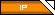
<style>
.page{position:relative;width:55px;height:15px;background:#f98b00}
.page>*{position:absolute;margin:0}
.t1{font:8px "BitDustTwo";color:#ffffff}
</style>
<div class="page">
<p class="t1" style="left:20px;top:5px;width:7px;height:5px">IP</p>
</div>
